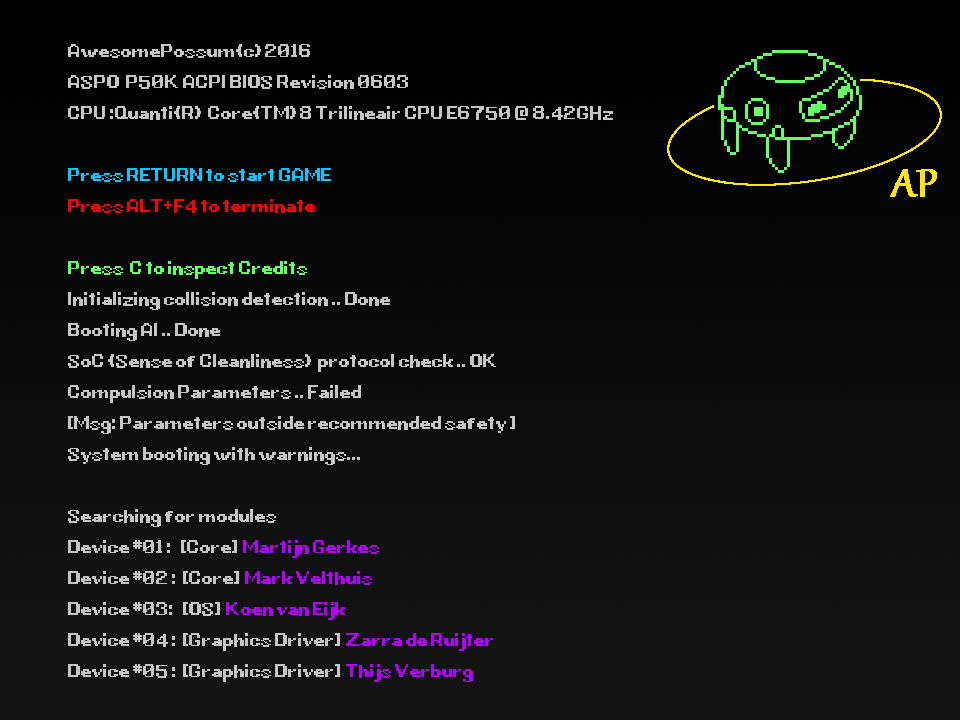
<style>
.page{position:relative;width:960px;height:720px}
.page>*{position:absolute;margin:0}
.t1{font:22px/31px "G.B.BOOT";color:#c5c5c5}
.t2{font:22px/31px "G.B.BOOT";color:#07c8ff}
.t3{font:22px/31px "G.B.BOOT";color:#ff0000}
.t4{font:22px/31px "G.B.BOOT";color:#63ff63}
.t5{font:22px/31px "G.B.BOOT";color:#b400ff}
.t6{font:48.5px "Gabriola";color:#ffe703;font-weight:bold}
</style>
<div class="page">
<p class="t1" style="left:68px;top:44px;width:545px;height:638px">AwesomePossum(c)2016<br>ASPO  P50K ACPI BIOS Revision 0603<br>CPU :Quanti(R) Core(TM)8 Trilineair CPU E6750 @ 8.42GHz<br><br><span class="t2">Press RETURN to start GAME<br></span><span class="t3">Press ALT+F4 to terminate<br><br></span><span class="t4">Press  C to inspect Credits<br></span>Initializing collision detection .. Done<br>Booting AI .. Done<br>SoC (Sense of Cleanliness) protocol check .. OK<br>Compulsion Parameters .. Failed<br>[Msg: Parameters outside recommended safety ]<br>System booting with warnings...<br><br>Searching for modules<br>Device #01 :   [Core] <span class="t5">Martijn Gerkes<br></span>Device #02 :  [Core] <span class="t5">Mark Velthuis<br></span>Device #03:   [OS]<span class="t5"> Koen van Eijk<br></span>Device #04 :  [Graphics Driver]<span class="t5"> Zarra de Ruijter<br></span>Device #05 :  [Graphics Driver] <span class="t5">Thijs Verburg</span></p>
<p class="t6" style="left:890px;top:169px;width:47px;height:28px">AP</p>
</div>
